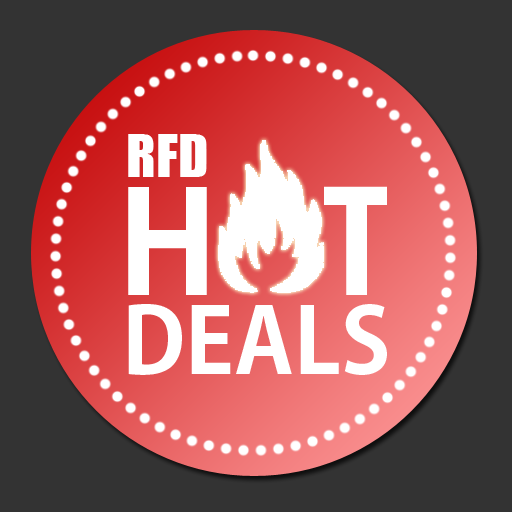
<style>
.page{position:relative;width:512px;height:512px;background:#333333}
.page>*{position:absolute;margin:0}
.t1{font:55px "Impact";color:#ffffff}
.t2{font:90px "AdobeGothicStd-Bold";color:#ffffff}
</style>
<div class="page">
<p class="t1" style="left:128px;top:134px;width:79px;height:43px">RFD</p>
<p class="t2" style="left:128px;top:304px;width:259px;height:71px">DEALS</p>
</div>
